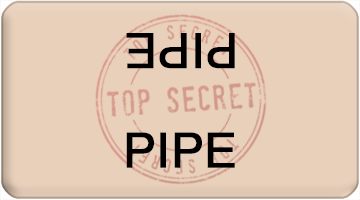
<style>
.page{position:relative;width:360px;height:200px;background:#e8d0bb}
.page>*{position:absolute;margin:0}
.t1{font:48px "ArialMT";color:#000000;font-weight:bold}
</style>
<div class="page">
<p class="t1" style="left:126px;top:33px;width:109px;height:36px;rotate:180deg">PIPE</p>
<p class="t1" style="left:126px;top:132px;width:109px;height:36px">PIPE</p>
</div>
